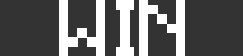
<style>
.page{position:relative;width:243px;height:56px;background:#333333}
.page>*{position:absolute;margin:0}
.t1{font:73.8px "Minecraft";color:#ffffff;text-transform:uppercase}
</style>
<div class="page">
<p class="t1" style="left:59px;top:0px;width:126px;height:56px">Win</p>
</div>
